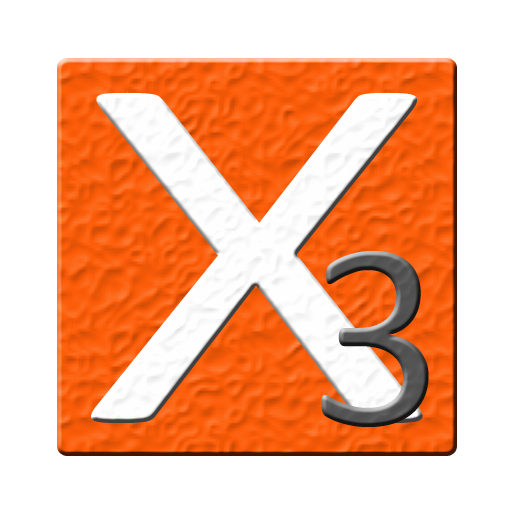
<style>
.page{position:relative;width:512px;height:512px;background:#ffffff}
.page>*{position:absolute;margin:0}
.t1{font:516px "Calibri";color:#fefefe;scale:1.37 1}
.t2{font:270px "Calibri";color:#535353}
</style>
<div class="page">
<p class="t1" style="left:91px;top:92px;width:332px;height:331px">X</p>
<p class="t2" style="left:321px;top:250px;width:108px;height:177px">3</p>
</div>
